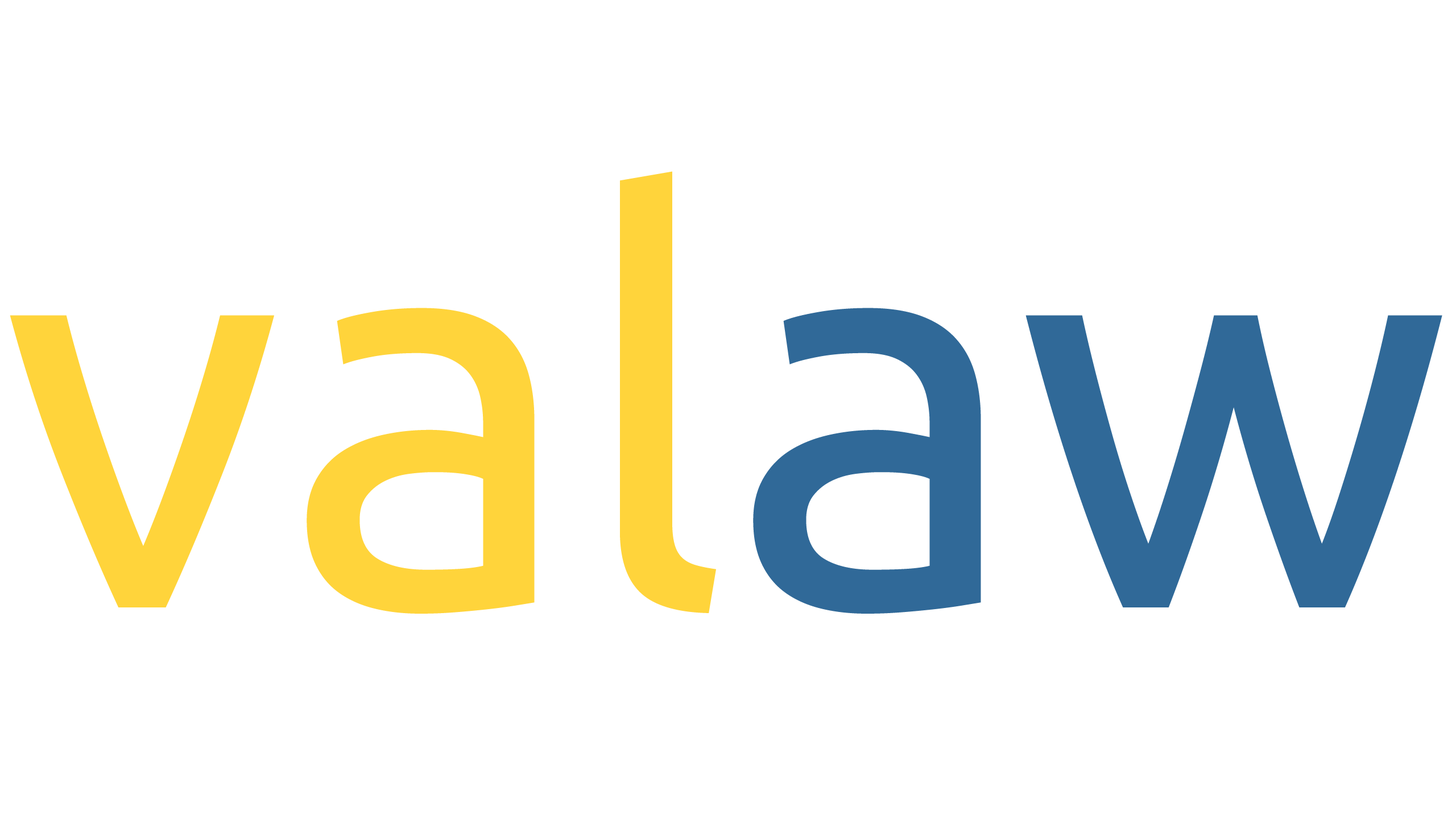
<style>
.page{position:relative;width:1456px;height:819px;background:#ffffff}
.page>*{position:absolute;margin:0}
.t1{font:561.6px "Ubuntu";color:#ffd43b}
.t2{font:561.6px "Ubuntu";color:#306998}
</style>
<div class="page">
<p class="t1" style="left:10px;top:171px;width:1432px;height:443px">val<span class="t2">aw</span></p>
</div>
